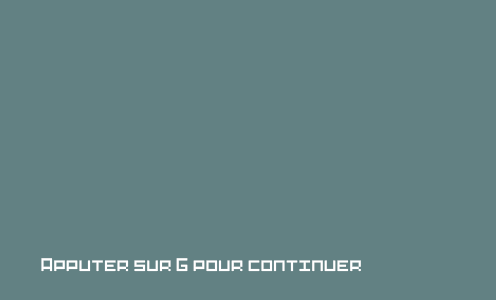
<style>
.page{position:relative;width:496px;height:300px;background:#628183}
.page>*{position:absolute;margin:0}
.t1{font:16.9px "Pixel-Art";color:#ffffff}
</style>
<div class="page">
<p class="t1" style="left:41px;top:258px;width:320px;height:14px">Apputer sur G pour continuer</p>
</div>
